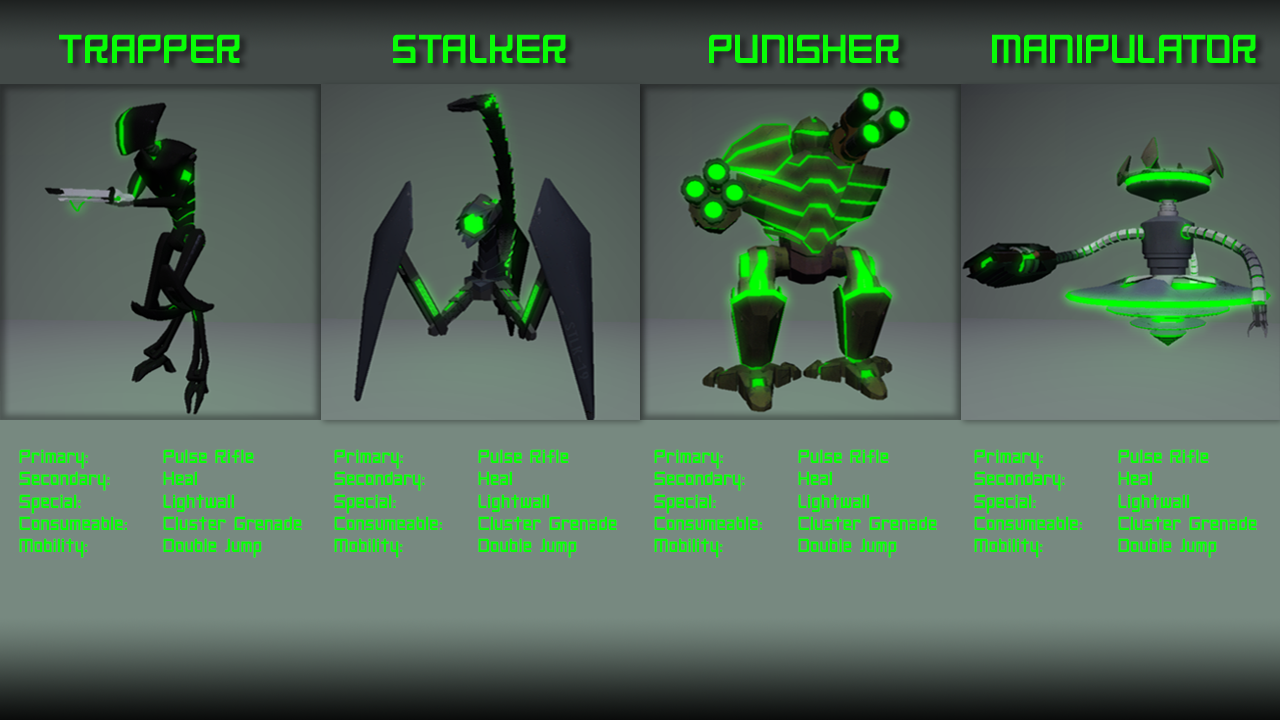
<style>
.page{position:relative;width:1280px;height:720px;background:#778980}
.page>*{position:absolute;margin:0}
.t1{font:18.7px "NeoGen";color:#08fd06}
</style>
<div class="page">
<p class="t1" style="left:19px;top:449px;width:283px;height:109px">Primary:   Pulse Rifle<br>Secondary:  Heal<br>Special:   Lightwall<br>Consumeable: Cluster Grenade<br>Mobility:   Double Jump</p>
<p class="t1" style="left:334px;top:449px;width:283px;height:109px">Primary:   Pulse Rifle<br>Secondary:  Heal<br>Special:   Lightwall<br>Consumeable: Cluster Grenade<br>Mobility:   Double Jump</p>
<p class="t1" style="left:654px;top:449px;width:283px;height:109px">Primary:   Pulse Rifle<br>Secondary:  Heal<br>Special:   Lightwall<br>Consumeable: Cluster Grenade<br>Mobility:   Double Jump</p>
<p class="t1" style="left:974px;top:449px;width:283px;height:109px">Primary:   Pulse Rifle<br>Secondary:  Heal<br>Special:   Lightwall<br>Consumeable: Cluster Grenade<br>Mobility:   Double Jump</p>
</div>
